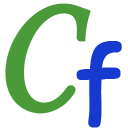
<style>
.page{position:relative;width:128px;height:128px;background:#ffffff}
.page>*{position:absolute;margin:0}
.t1{font:154.5px "STLiti";color:#4a9a3a;font-weight:bold}
.t2{font:100px "ComicSansMS";color:#1639d0;font-weight:bold}
</style>
<div class="page">
<p class="t1" style="left:5px;top:3px;width:86px;height:111px">C</p>
<p class="t2" style="left:76px;top:41px;width:46px;height:87px">f</p>
</div>
